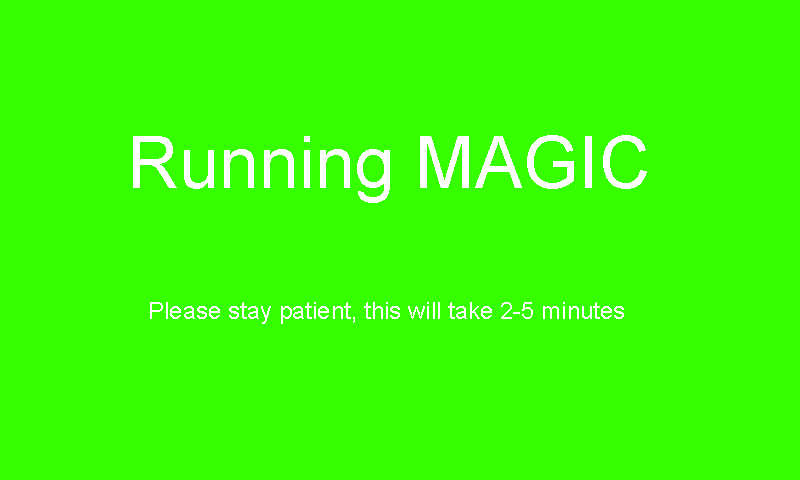
<style>
.page{position:relative;width:800px;height:480px;background:#36ff00}
.page>*{position:absolute;margin:0}
.t1{font:72px "ArialMT";color:#ffffff}
.t2{font:24px "ArialMT";color:#ffffff}
</style>
<div class="page">
<p class="t1" style="left:133px;top:135px;width:514px;height:68px">Running MAGIC</p>
<p class="t2" style="left:150px;top:302px;width:474px;height:22px">Please stay patient, this will take 2-5 minutes</p>
</div>
